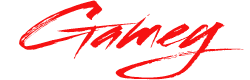
<style>
.page{position:relative;width:250px;height:80px;background:#ffffff}
.page>*{position:absolute;margin:0}
.t1{font:73.6px "Streetbrush";color:#f61212;scale:1.31 1}
</style>
<div class="page">
<p class="t1" style="left:19px;top:0px;width:225px;height:80px;rotate:-1deg">Gamey</p>
</div>
